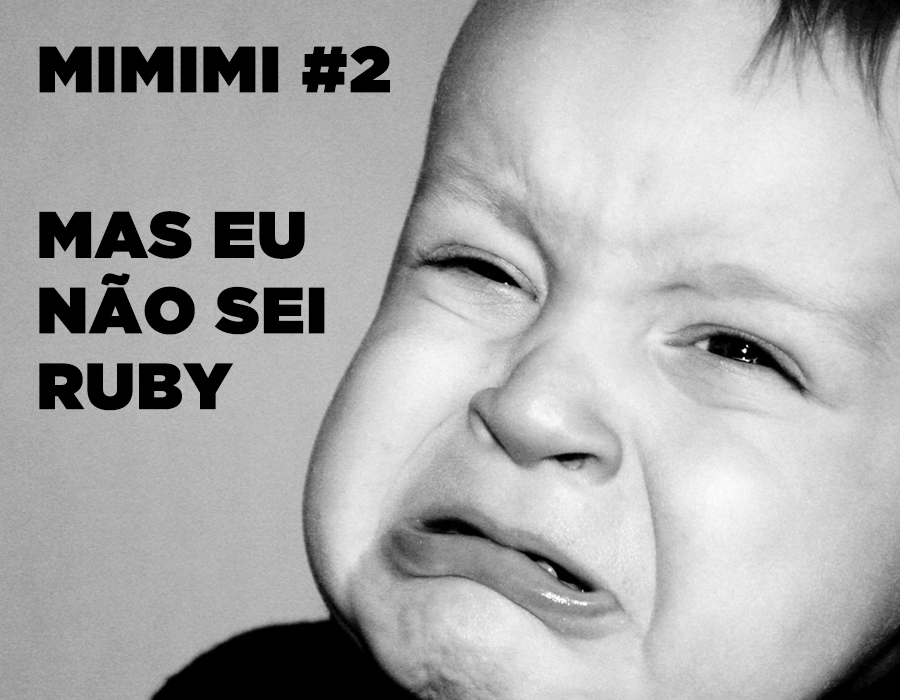
<style>
.page{position:relative;width:900px;height:700px}
.page>*{position:absolute;margin:0}
.t1{font:65.1px "GothamUltra";color:#000000;font-weight:bold}
.t2{font:65px/75.7px "GothamUltra";color:#000000;font-weight:bold}
</style>
<div class="page">
<p class="t1" style="left:39px;top:45px;width:351px;height:48px">MIMIMI #2</p>
<p class="t2" style="left:39px;top:211px;width:286px;height:200px">MAS EU<br>NÃO SEI<br>RUBY</p>
</div>
